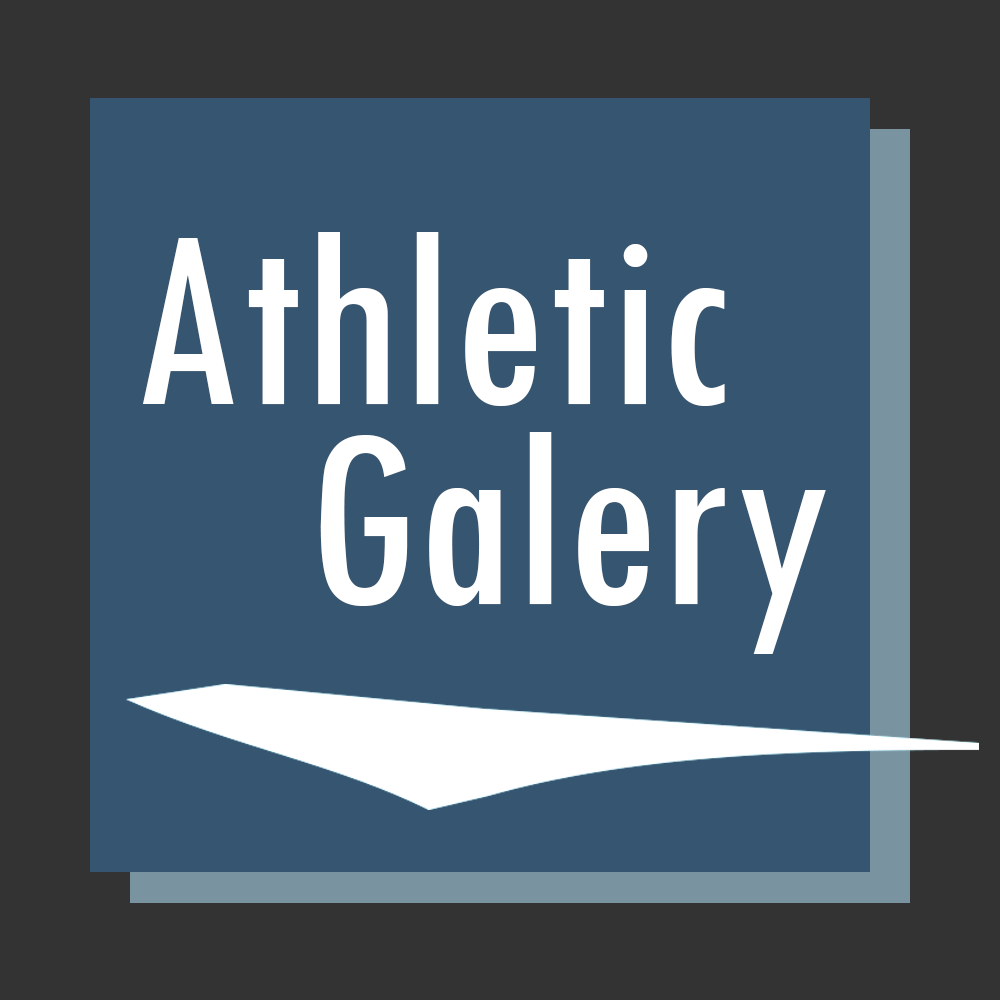
<style>
.page{position:relative;width:1000px;height:1000px;background:#355570}
.page>*{position:absolute;margin:0}
.t1{font:266.7px "TwCenMT-Condensed";color:#ffffff}
</style>
<div class="page">
<p class="t1" style="left:143px;top:232px;width:582px;height:174px">Athletic</p>
<p class="t1" style="left:320px;top:432px;width:506px;height:222px">Galery</p>
</div>
